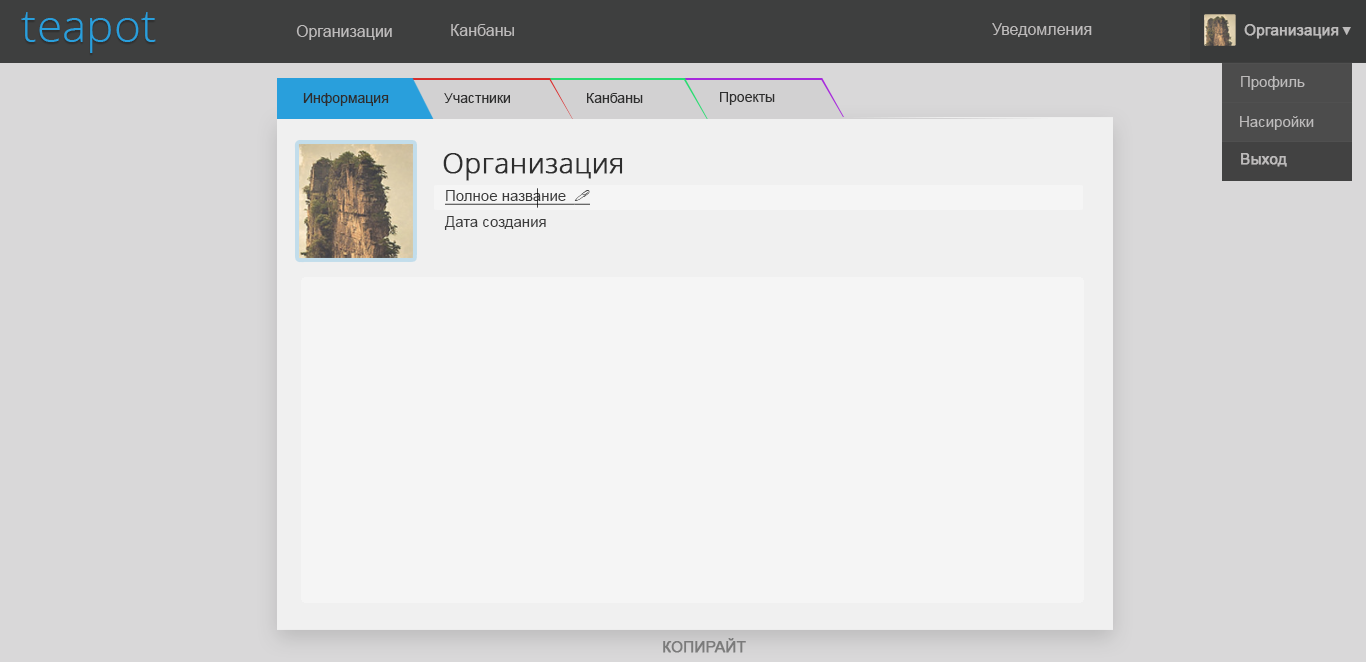
<style>
.page{position:relative;width:1366px;height:662px;background:#d9d8d9}
.page>*{position:absolute;margin:0}
.t1{font:46px "OpenSans-Light";color:#299fdc}
.t2{font:16px "ArialMT";color:#bdbbbb}
.t3{font:15px "ArialMT";color:#bdbbbb;font-weight:bold}
.t4{font:12.3px "ArialMT";color:#bdbbbb}
.t5{font:15px "ArialMT";color:#bdbbbb}
.t6{font:14px "ArialMT";color:#2e2e2e}
.t7{font:28px "OpenSans-Light";color:#2e2e2e;font-weight:bold}
.t8{font:15px "ArialMT";color:#3b3b3b;text-decoration:underline}
.t9{font:15px "Wingdings2";color:#3b3b3b;text-decoration:underline}
.t10{font:15px "ArialMT";color:#3b3b3b}
.t11{font:15px "ArialMT";color:#7b7a7a;font-weight:bold}
</style>
<div class="page">
<p class="t1" style="left:21px;top:12px;width:135px;height:41px">teapot</p>
<p class="t2" style="left:296px;top:25px;width:96px;height:15px">Организации</p>
<p class="t2" style="left:451px;top:24px;width:63px;height:12px">Канбаны</p>
<p class="t2" style="left:992px;top:23px;width:100px;height:14px">Уведомления</p>
<p class="t3" style="left:1244px;top:24px;width:95px;height:15px">Организация</p>
<p class="t4" style="left:1342px;top:27px;width:9px;height:8px">▼</p>
<p class="t5" style="left:1241px;top:76px;width:64px;height:14px">Профиль</p>
<p class="t6" style="left:303px;top:93px;width:86px;height:13px">Информация</p>
<p class="t6" style="left:444px;top:93px;width:66px;height:10px">Участники</p>
<p class="t6" style="left:587px;top:93px;width:56px;height:10px">Канбаны</p>
<p class="t6" style="left:720px;top:92px;width:55px;height:13px">Проекты</p>
<p class="t5" style="left:1240px;top:116px;width:74px;height:14px">Насиройки</p>
<p class="t7" style="left:443px;top:153px;width:180px;height:28px">Организация</p>
<p class="t3" style="left:1241px;top:153px;width:46px;height:14px">Выход</p>
<p class="t8" style="left:445px;top:190px;width:145px;height:15px">Полное название  <span class="t9">!</span></p>
<p class="t10" style="left:444px;top:216px;width:102px;height:14px">Дата создания</p>
<p class="t11" style="left:663px;top:638px;width:83px;height:15px">КОПИРАЙТ</p>
</div>
